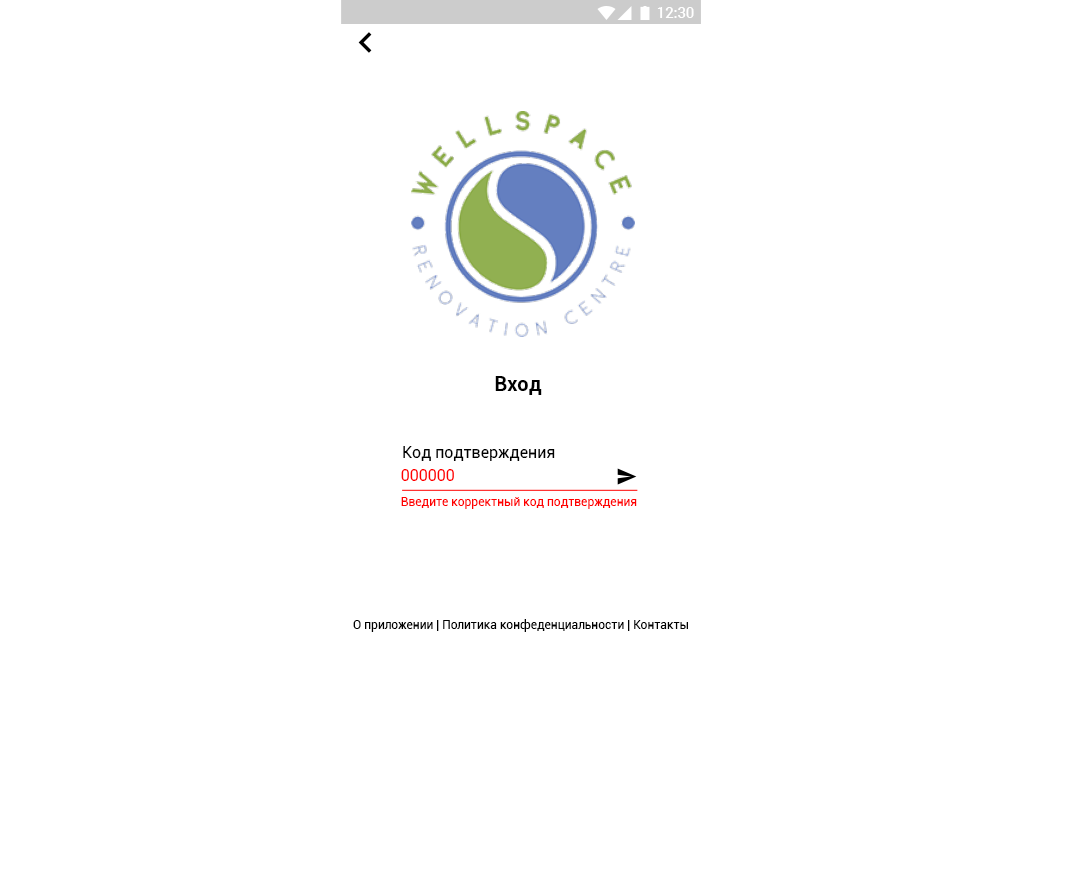
<style>
.page{position:relative;width:1080px;height:896px;background:#ffffff}
.page>*{position:absolute;margin:0}
.t1{font:14.7px "Roboto-Medium";color:#ffffff}
.t2{font:20px "Roboto-Bold";color:#000000}
.t3{font:16px "Roboto-Regular";color:#000000}
.t4{font:16px "Roboto-Regular";color:#ff0000}
.t5{font:12px "Roboto-Regular";color:#ff0000}
.t6{font:12px "Roboto-Regular";color:#000000}
</style>
<div class="page">
<p class="t1" style="left:657px;top:7px;width:37px;height:11px">12:30</p>
<p class="t2" style="left:495px;top:376px;width:47px;height:19px">Вход</p>
<p class="t3" style="left:403px;top:446px;width:152px;height:15px">Код подтверждения</p>
<p class="t4" style="left:401px;top:469px;width:53px;height:12px">000000</p>
<p class="t5" style="left:401px;top:497px;width:236px;height:12px">Введите корректный код подтверждения</p>
<p class="t6" style="left:353px;top:619px;width:335px;height:13px">О приложении | Политика конфеденциальности | Контакты</p>
</div>
